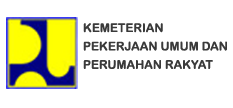
<style>
.page{position:relative;width:233px;height:108px;background:#ffffff}
.page>*{position:absolute;margin:0}
.t1{font:12px "ArialRoundedMTBold";color:#3a3a3a}
</style>
<div class="page">
<p class="t1" style="left:83px;top:23px;width:144px;height:46px">KEMETERIAN <br>PEKERJAAN UMUM DAN <br>PERUMAHAN RAKYAT</p>
</div>
